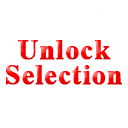
<style>
.page{position:relative;width:128px;height:128px;background:#ffffff}
.page>*{position:absolute;margin:0}
.t1{font:28px/25px "TimesNewRomanPS-BoldMT";letter-spacing:0.02em;color:#ff0000;font-weight:bold}
</style>
<div class="page">
<p class="t1" style="left:6px;top:40px;width:116px;height:45px;text-align:center">Unlock<br>Selection</p>
</div>
